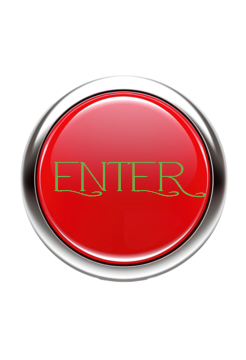
<style>
.page{position:relative;width:246px;height:360px;background:#ffffff}
.page>*{position:absolute;margin:0}
.t1{font:41.5px "Avanti-Serif-Regular";color:#62b34c}
</style>
<div class="page">
<p class="t1" style="left:54px;top:161px;width:152px;height:37px">ENTER</p>
</div>
